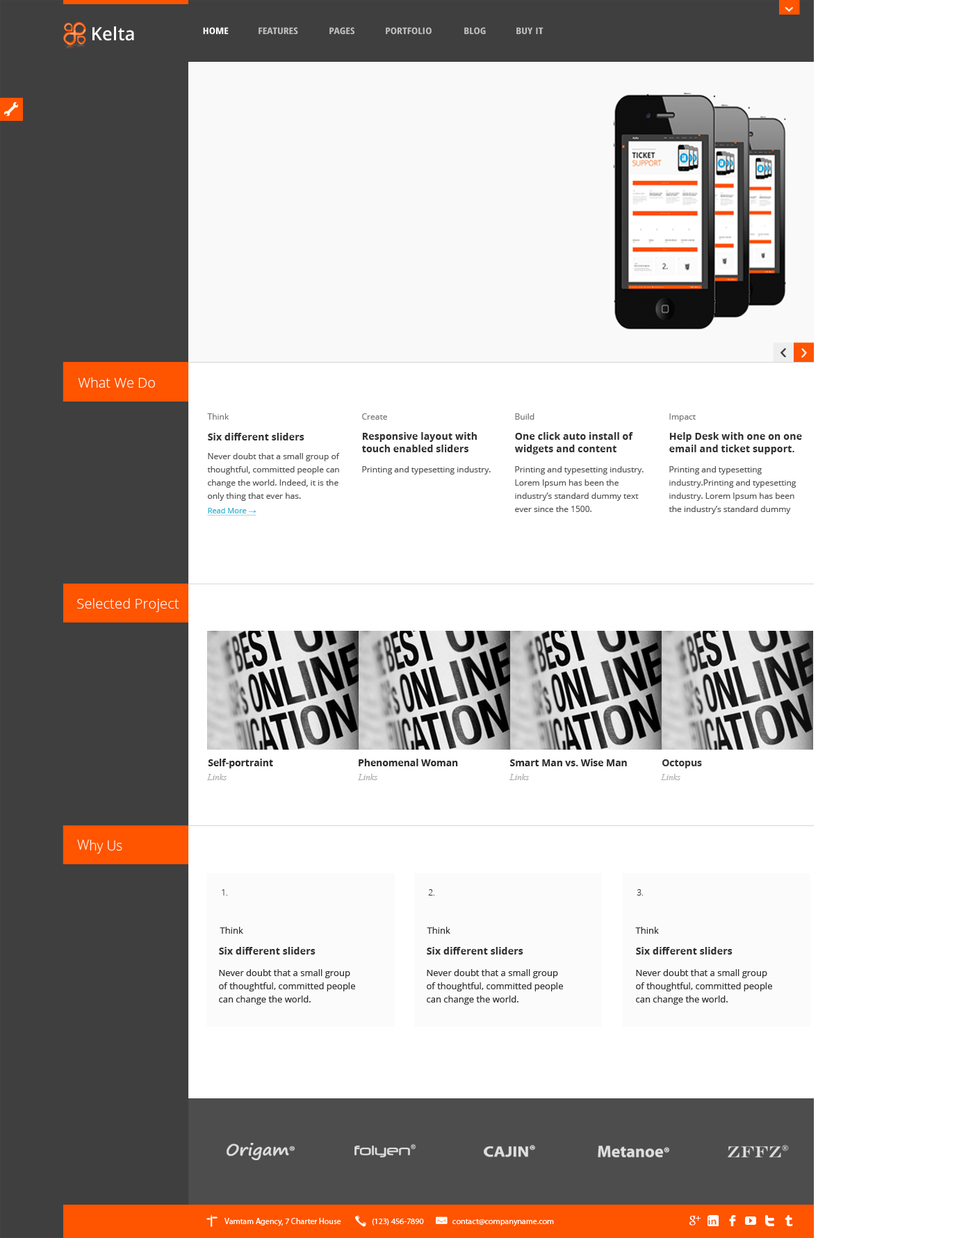
<style>
.page{position:relative;width:973px;height:1238px;background:#ffffff}
.page>*{position:absolute;margin:0}
.t1{font:18.3px "OpenSans-Semibold";color:#ffffff}
.t2{font:9px "OpenSans-CondensedBold";color:#ffffff;text-transform:uppercase;scale:1.21 1}
.t3{font:9px "OpenSans-CondensedBold";color:#c1c1c1;text-transform:uppercase;scale:1.21 1}
.t4{font:13.8px "OpenSans-Light";color:#ffffff}
.t5{font:8.3px "OpenSans";color:#767676}
.t6{font:10px "OpenSans-Bold";color:#313131}
.t7{font:10px/12.1px "OpenSans-Bold";color:#313131}
.t8{font:8.3px/13.2px "OpenSans";color:#555555}
.t9{font:8.3px "OpenSans";color:#555555}
.t10{font:7.6px "OpenSans";color:#33b1d4;text-decoration:underline}
.t11{font:7.6px "ArialMT";color:#33b1d4;text-decoration:underline}
.t12{font:14.2px "OpenSans-Light";color:#ffffff}
.t13{font:9.6px "OpenSans-Bold";color:#2c2c2c}
.t14{font:8.9px "TimesNewRomanPS-ItalicMT";color:#aeaeae}
.t15{font:13.9px "OpenSans-Light";color:#ffffff;scale:0.96 1}
.t16{font:8.3px "OpenSans-Light";color:#313131}
.t17{font:9px "OpenSans";color:#313131}
.t18{font:9px/13.2px "OpenSans";color:#313131}
.t19{font:8.3px "MyriadPro-Regular";color:#ffffff}
</style>
<div class="page">
<p class="t1" style="left:92px;top:26px;width:42px;height:15px">Kelta</p>
<p class="t2" style="left:203px;top:27px;width:26px;height:8px">Home</p>
<p class="t3" style="left:259px;top:27px;width:39px;height:8px">Features</p>
<p class="t3" style="left:329px;top:27px;width:26px;height:8px">Pages</p>
<p class="t3" style="left:386px;top:27px;width:46px;height:8px">Portfolio</p>
<p class="t3" style="left:464px;top:27px;width:22px;height:8px">Blog</p>
<p class="t3" style="left:516px;top:27px;width:27px;height:8px">buy it</p>
<p class="t4" style="left:78px;top:377px;width:77px;height:11px">What We Do</p>
<p class="t5" style="left:207px;top:414px;width:22px;height:6px">Think</p>
<p class="t5" style="left:362px;top:414px;width:25px;height:6px">Create</p>
<p class="t5" style="left:515px;top:414px;width:19px;height:6px">Build</p>
<p class="t5" style="left:669px;top:414px;width:27px;height:8px">Impact</p>
<p class="t6" style="left:208px;top:433px;width:96px;height:8px">Six different sliders</p>
<p class="t7" style="left:362px;top:432px;width:115px;height:20px">Responsive layout with<br>touch enabled sliders</p>
<p class="t7" style="left:515px;top:432px;width:118px;height:23px">One click auto install of<br>widgets and content</p>
<p class="t7" style="left:669px;top:432px;width:133px;height:23px">Help Desk with one on one<br>email and ticket support.</p>
<p class="t8" style="left:207px;top:453px;width:133px;height:48px">Never doubt that a small group of thoughtful, committed people can change the world. Indeed, it is the only thing that ever has.</p>
<p class="t9" style="left:362px;top:466px;width:129px;height:9px">Printing and typesetting industry.</p>
<p class="t8" style="left:515px;top:466px;width:129px;height:46px">Printing and typesetting industry. Lorem Ipsum has been the industry’s standard dummy text ever since the 1500.</p>
<p class="t8" style="left:669px;top:466px;width:127px;height:48px">Printing and typesetting industry.Printing and typesetting industry. Lorem Ipsum has been the industry’s standard dummy text ever since the 1500.</p>
<p class="t10" style="left:207px;top:508px;width:49px;height:8px">Read More <span class="t11">→</span></p>
<p class="t12" style="left:77px;top:598px;width:102px;height:14px">Selected Project</p>
<p class="t13" style="left:208px;top:759px;width:65px;height:10px">Self-portraint</p>
<p class="t13" style="left:359px;top:759px;width:99px;height:8px">Phenomenal Woman</p>
<p class="t13" style="left:510px;top:759px;width:117px;height:8px">Smart Man vs. Wise Man</p>
<p class="t13" style="left:662px;top:760px;width:40px;height:9px">Octopus</p>
<p class="t14" style="left:207px;top:774px;width:20px;height:6px">Links</p>
<p class="t14" style="left:358px;top:774px;width:19px;height:6px">Links</p>
<p class="t14" style="left:509px;top:774px;width:20px;height:6px">Links</p>
<p class="t14" style="left:661px;top:774px;width:19px;height:6px">Links</p>
<p class="t15" style="left:77px;top:840px;width:45px;height:14px">Why Us</p>
<p class="t16" style="left:222px;top:890px;width:5px;height:6px">1.</p>
<p class="t16" style="left:428px;top:890px;width:6px;height:6px">2.</p>
<p class="t16" style="left:637px;top:890px;width:6px;height:6px">3.</p>
<p class="t17" style="left:220px;top:927px;width:23px;height:7px">Think</p>
<p class="t17" style="left:427px;top:927px;width:23px;height:7px">Think</p>
<p class="t17" style="left:635px;top:927px;width:24px;height:7px">Think</p>
<p class="t6" style="left:219px;top:947px;width:97px;height:8px">Six different sliders</p>
<p class="t6" style="left:427px;top:947px;width:96px;height:8px">Six different sliders</p>
<p class="t6" style="left:636px;top:947px;width:97px;height:8px">Six different sliders</p>
<p class="t18" style="left:219px;top:969px;width:136px;height:36px">Never doubt that a small group of thoughtful, committed people can change the world.</p>
<p class="t18" style="left:427px;top:969px;width:136px;height:36px">Never doubt that a small group of thoughtful, committed people can change the world.</p>
<p class="t18" style="left:636px;top:969px;width:136px;height:36px">Never doubt that a small group of thoughtful, committed people can change the world.</p>
<p class="t19" style="left:224px;top:1218px;width:330px;height:9px">Vamtam Agency, 7 Charter House         (123) 456-7890            contact@companyname.com</p>
</div>
